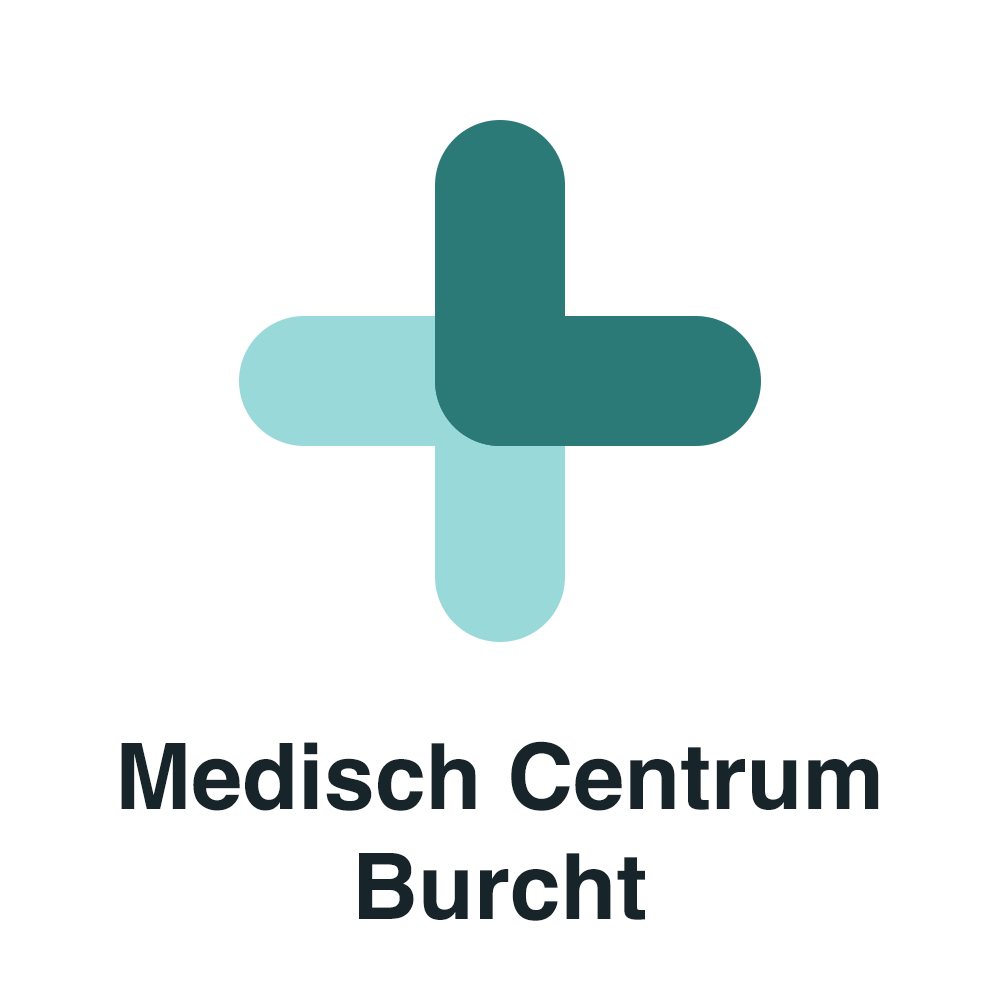
<style>
.page{position:relative;width:1000px;height:1000px;background:#ffffff}
.page>*{position:absolute;margin:0}
.t1{font:91.7px "Helvetica-Bold";color:#17252a}
</style>
<div class="page">
<p class="t1" style="left:121px;top:741px;width:758px;height:180px;text-align:center">Medisch Centrum<br>Burcht</p>
</div>
